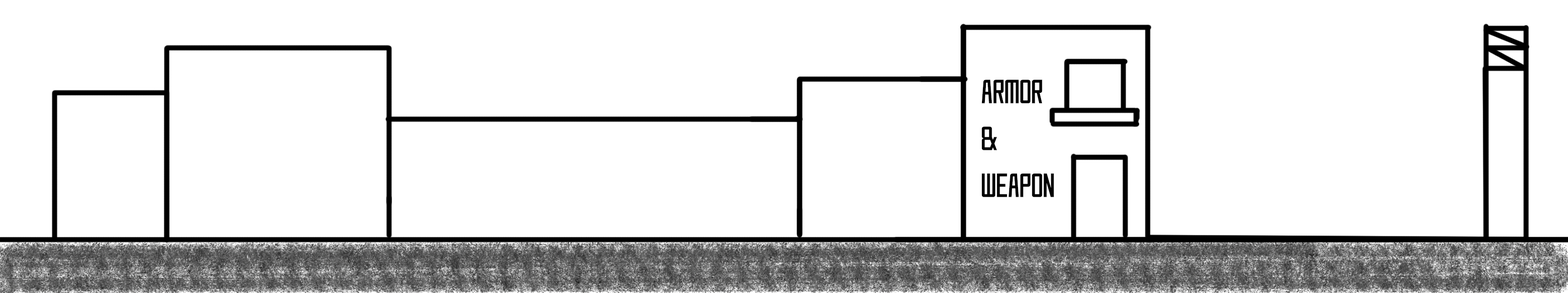
<style>
.page{position:relative;width:1568px;height:293px;background:#ffffff}
.page>*{position:absolute;margin:0}
.t1{font:30.5px/3px "SAOUI-Regular";color:#000000}
</style>
<div class="page">
<p class="t1" style="left:981px;top:79px;width:73px;height:118px">ARMOR<br><br>&amp;<br><br>WEAPON</p>
</div>
